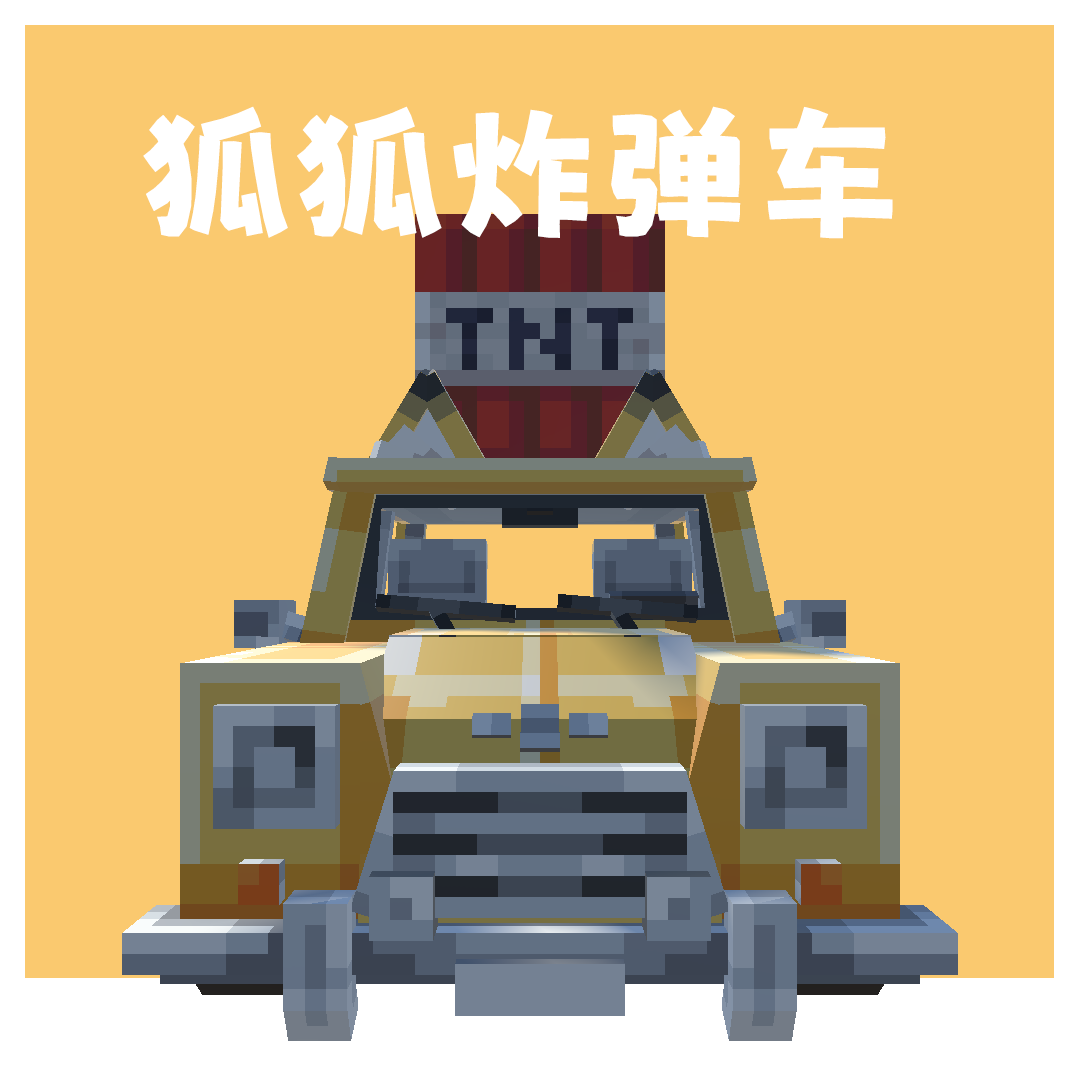
<style>
.page{position:relative;width:1080px;height:1080px;background:#fac96f}
.page>*{position:absolute;margin:0}
.t1{font:150px "MaokenAssortedSans";letter-spacing:0.025em;color:#ffffff}
</style>
<div class="page">
<p class="t1" style="left:143px;top:106px;width:750px;height:133px">狐狐炸弹车</p>
</div>
